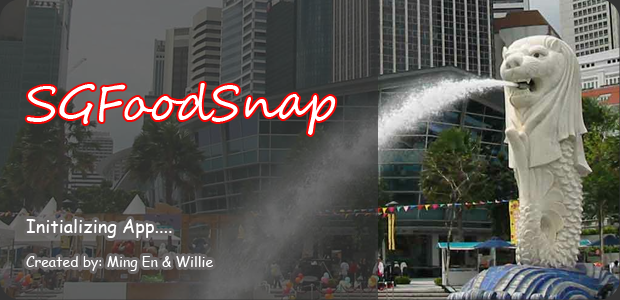
<style>
.page{position:relative;width:620px;height:300px}
.page>*{position:absolute;margin:0}
.t1{font:48px "SegoeScript";color:#ffffff}
.t2{font:14px "ComicSansMS";color:#ffffff}
.t3{font:18px "ComicSansMS";color:#ffffff}
</style>
<div class="page">
<p class="t1" style="left:26px;top:83px;width:310px;height:52px">SGFoodSnap</p>
<p class="t2" style="left:26px;top:219px;width:187px;height:52px"><span class="t3">Initializing App....<br></span><br>Created by: Ming En &amp; Willie</p>
</div>
